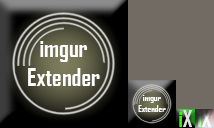
<style>
.page{position:relative;width:214px;height:128px;background:#716b63}
.page>*{position:absolute;margin:0}
.t1{font:24px "AgencyFB-Bold";color:#ffffff}
.t2{font:14px "AgencyFB-Bold";color:#ffffff}
.t3{font:9px "AgencyFB-Bold";color:#ffffff}
.t4{font:5.2px "AgencyFB-Bold";color:#ffffff}
.t5{font:22px "AgencyFB-Bold";color:#30ff00}
.t6{font:22px "AgencyFB-Bold";color:#e2e2e2}
</style>
<div class="page">
<p class="t1" style="left:28px;top:41px;width:72px;height:45px;text-align:center"><span class="t2"><br><br></span>imgur<br>Extender</p>
<p class="t3" style="left:138px;top:95px;width:28px;height:17px;text-align:center"><span class="t4"><br><br></span>imgur<br>Extender</p>
<p class="t5" style="left:179px;top:110px;width:13px;height:17px">i<span class="t6">X</span></p>
</div>
